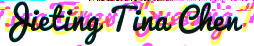
<style>
.page{position:relative;width:254px;height:46px;background:#ffffff}
.page>*{position:absolute;margin:0}
.t1{font:30.2px "Pacifico-Regular";color:#070809}
</style>
<div class="page">
<p class="t1" style="left:9px;top:0px;width:234px;height:44px">Jieting Tina Chen</p>
</div>
